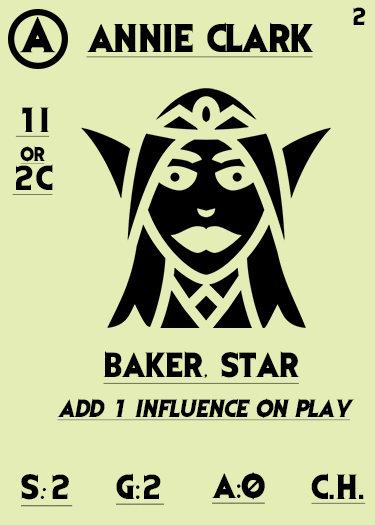
<style>
.page{position:relative;width:375px;height:525px;background:#e3edb5}
.page>*{position:absolute;margin:0}
.t1{font:41.7px "EvilDead";letter-spacing:-0.05em;color:#000000}
.t2{font:20.8px "EvilDead";color:#000000}
.t3{font:33.3px "EvilDead";color:#000000;text-decoration:underline}
.t4{font:29.2px/29.2px "EvilDead";color:#000000;text-decoration:underline}
.t5{font:16.7px/29.2px "EvilDead";color:#000000;text-decoration:underline}
.t6{font:29.2px "EvilDead";color:#000000;text-decoration:underline}
.t7{font:29.2px "Fadli-Script";color:#000000;text-decoration:underline}
.t8{font:20.8px "EvilDead";color:#000000;font-style:italic;text-decoration:underline}
.t9{font:29.2px "MyriadPro-Regular";color:#000000;text-decoration:underline}
</style>
<div class="page">
<p class="t1" style="left:19px;top:16px;width:37px;height:37px">A</p>
<p class="t2" style="left:353px;top:7px;width:13px;height:18px">2</p>
<p class="t3" style="left:86px;top:22px;width:228px;height:36px">ANNIE Clark</p>
<p class="t4" style="left:12px;top:107px;width:41px;height:88px;text-align:center">1I<br><span class="t5">or<br></span>2C</p>
<p class="t6" style="left:103px;top:351px;width:197px;height:33px">Baker<span class="t7">,</span> STAR</p>
<p class="t8" style="left:57px;top:398px;width:298px;height:23px">Add 1 influence on play</p>
<p class="t6" style="left:116px;top:473px;width:49px;height:32px">G<span class="t9">:</span>2</p>
<p class="t6" style="left:211px;top:472px;width:54px;height:32px">A<span class="t9">:</span>0</p>
<p class="t6" style="left:311px;top:473px;width:55px;height:31px">C.H.</p>
<p class="t6" style="left:21px;top:474px;width:52px;height:33px">S<span class="t7">:</span>2</p>
</div>
